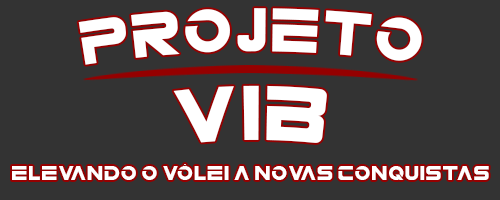
<style>
.page{position:relative;width:500px;height:200px;background:#333333}
.page>*{position:absolute;margin:0}
.t1{font:48px "NDLOGOS";color:#ffffff}
.t2{font:60px "NDLOGOS";color:#ffffff}
.t3{font:16px "NDLOGOS";color:#ffffff}
</style>
<div class="page">
<p class="t1" style="left:78px;top:8px;width:344px;height:57px">Projeto</p>
<p class="t2" style="left:173px;top:85px;width:154px;height:58px">VIB</p>
<p class="t3" style="left:12px;top:164px;width:477px;height:16px">Elevando o vôlei a novas conquistas</p>
</div>
